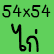
<style>
.page{position:relative;width:54px;height:54px;background:#60d05b}
.page>*{position:absolute;margin:0}
.t1{font:18px "korbau-Medium";color:#000000}
.t2{font:30px "korbau-Medium";color:#000000}
</style>
<div class="page">
<p class="t1" style="left:2px;top:4px;width:49px;height:14px">54x54</p>
<p class="t2" style="left:11px;top:23px;width:28px;height:29px">ไก่</p>
</div>
